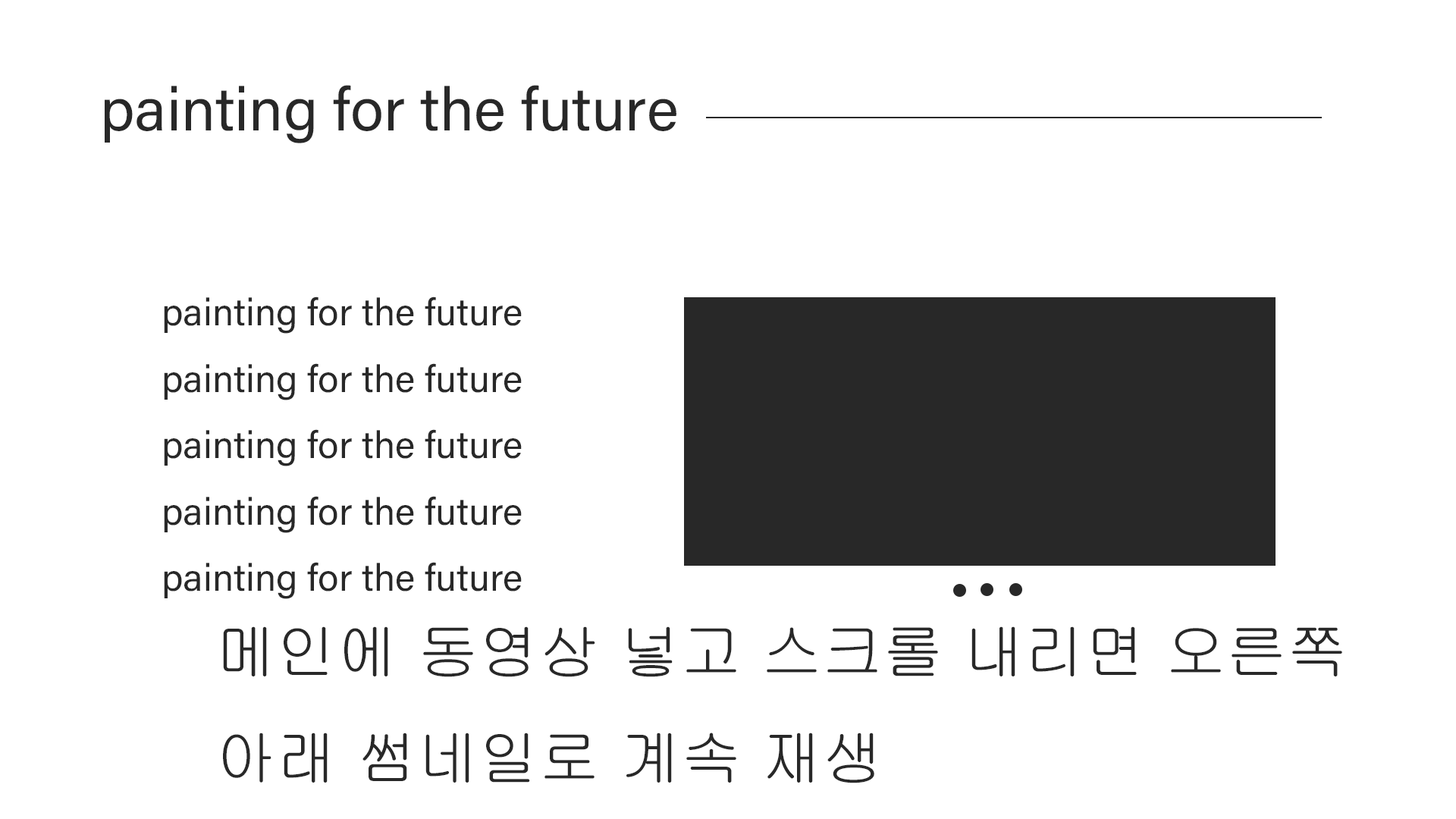
<style>
.page{position:relative;width:1456px;height:819px;background:#ffffff}
.page>*{position:absolute;margin:0}
.t1{font:60.7px "AcuminConcept-Regular";color:#282828}
.t2{font:37.9px "AcuminConcept-Regular";color:#282828}
.t3{font:60.7px "Gulim";color:#282828}
</style>
<div class="page">
<p class="t1" style="left:105px;top:85px;width:571px;height:58px">painting for the future</p>
<p class="t2" style="left:164px;top:297px;width:358px;height:302px">painting for the future<br>painting for the future<br>painting for the future<br>painting for the future<br>painting for the future</p>
<p class="t3" style="left:223px;top:626px;width:1119px;height:157px">메인에 동영상 넣고 스크롤 내리면 오른쪽<br>아래 썸네일로 계속 재생</p>
</div>
